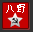
<style>
.page{position:relative;width:33px;height:32px;background:#c50000}
.page>*{position:absolute;margin:0}
.t1{font:10.4px "SimSun";color:#ffffff}
</style>
<div class="page">
<p class="t1" style="left:6px;top:4px;width:19px;height:9px">八野</p>
</div>
